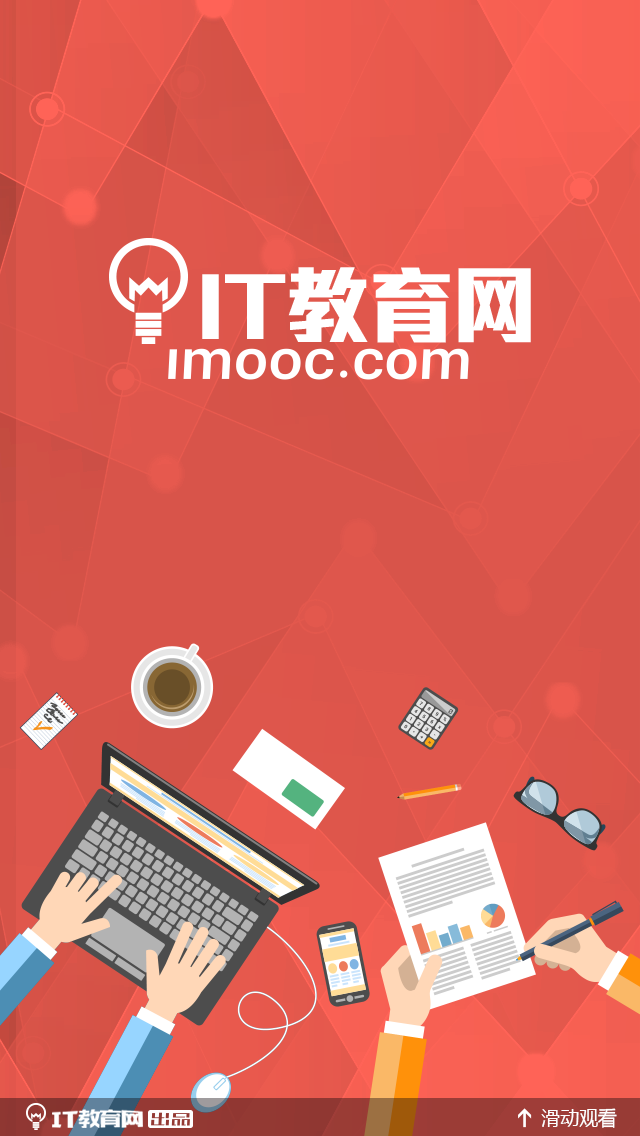
<style>
.page{position:relative;width:640px;height:1136px}
.page>*{position:absolute;margin:0}
.t1{font:84.9px "MStiffHeiPRC-UltraBold";letter-spacing:-0.013em;color:#ffffff}
.t2{font:20.2px "MicrosoftYaHei";color:#ffffff;scale:0.94 1}
</style>
<div class="page">
<p class="t1" style="left:202px;top:267px;width:329px;height:76px">IT教育网</p>
<p class="t2" style="left:541px;top:1108px;width:76px;height:20px">滑动观看</p>
</div>
